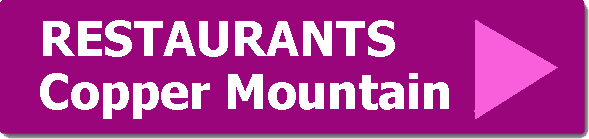
<style>
.page{position:relative;width:589px;height:139px;background:#9a057c}
.page>*{position:absolute;margin:0}
.t1{font:48px "Tahoma-Bold";color:#ffffff}
</style>
<div class="page">
<p class="t1" style="left:40px;top:73px;width:409px;height:46px">Copper Mountain</p>
</div>
